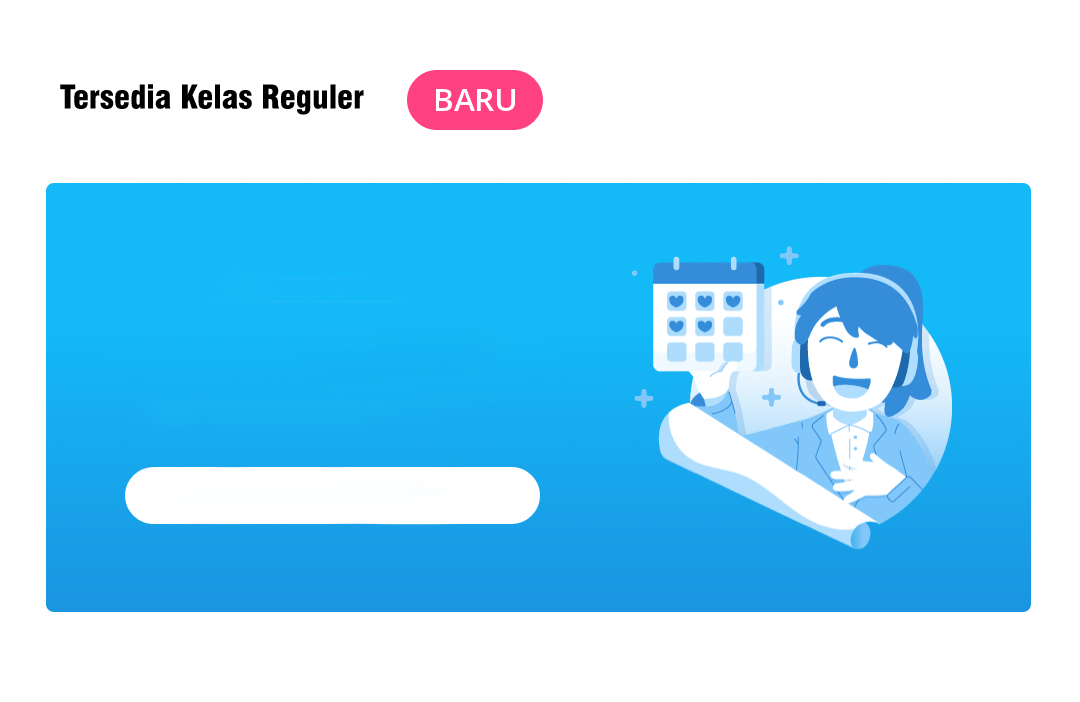
<style>
.page{position:relative;width:1080px;height:702px;background:#ffffff}
.page>*{position:absolute;margin:0}
.t1{font:32px "Swiss721BT-BlackCondensed";color:#000000}
</style>
<div class="page">
<p class="t1" style="left:60px;top:84px;width:304px;height:31px">Tersedia Kelas Reguler</p>
</div>
